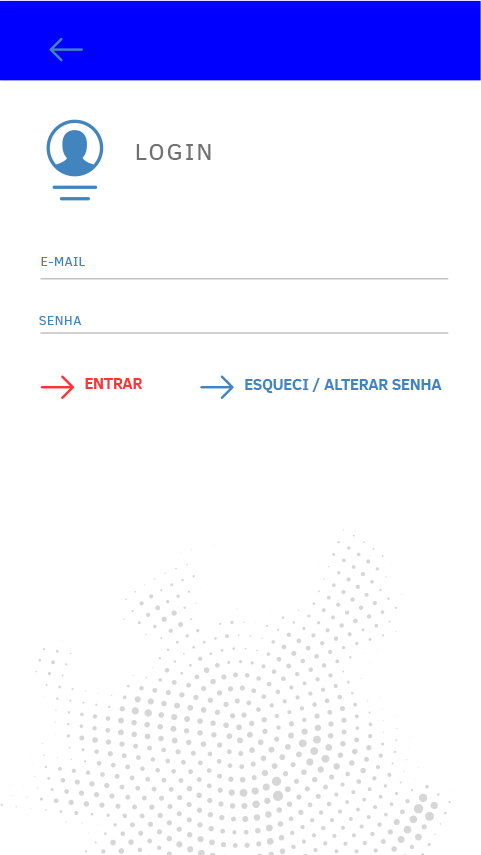
<style>
.page{position:relative;width:481px;height:855px;background:#ffffff}
.page>*{position:absolute;margin:0}
.t1{font:23.6px "ClearSans";letter-spacing:0.1em;color:#707072}
.t2{font:13.3px "ClearSans";letter-spacing:0.02em;color:#4284bd}
.t3{font:15.5px "ClearSans-Bold";color:#ff3333}
.t4{font:15.5px "ClearSans-Bold";color:#4284bd}
</style>
<div class="page">
<p class="t1" style="left:136px;top:144px;width:75px;height:16px">LOGIN</p>
<p class="t2" style="left:41px;top:257px;width:44px;height:9px">E-MAIL</p>
<p class="t2" style="left:39px;top:316px;width:43px;height:9px">SENHA</p>
<p class="t3" style="left:85px;top:378px;width:58px;height:11px">ENTRAR</p>
<p class="t4" style="left:245px;top:378px;width:197px;height:15px">ESQUECI / ALTERAR SENHA</p>
</div>
